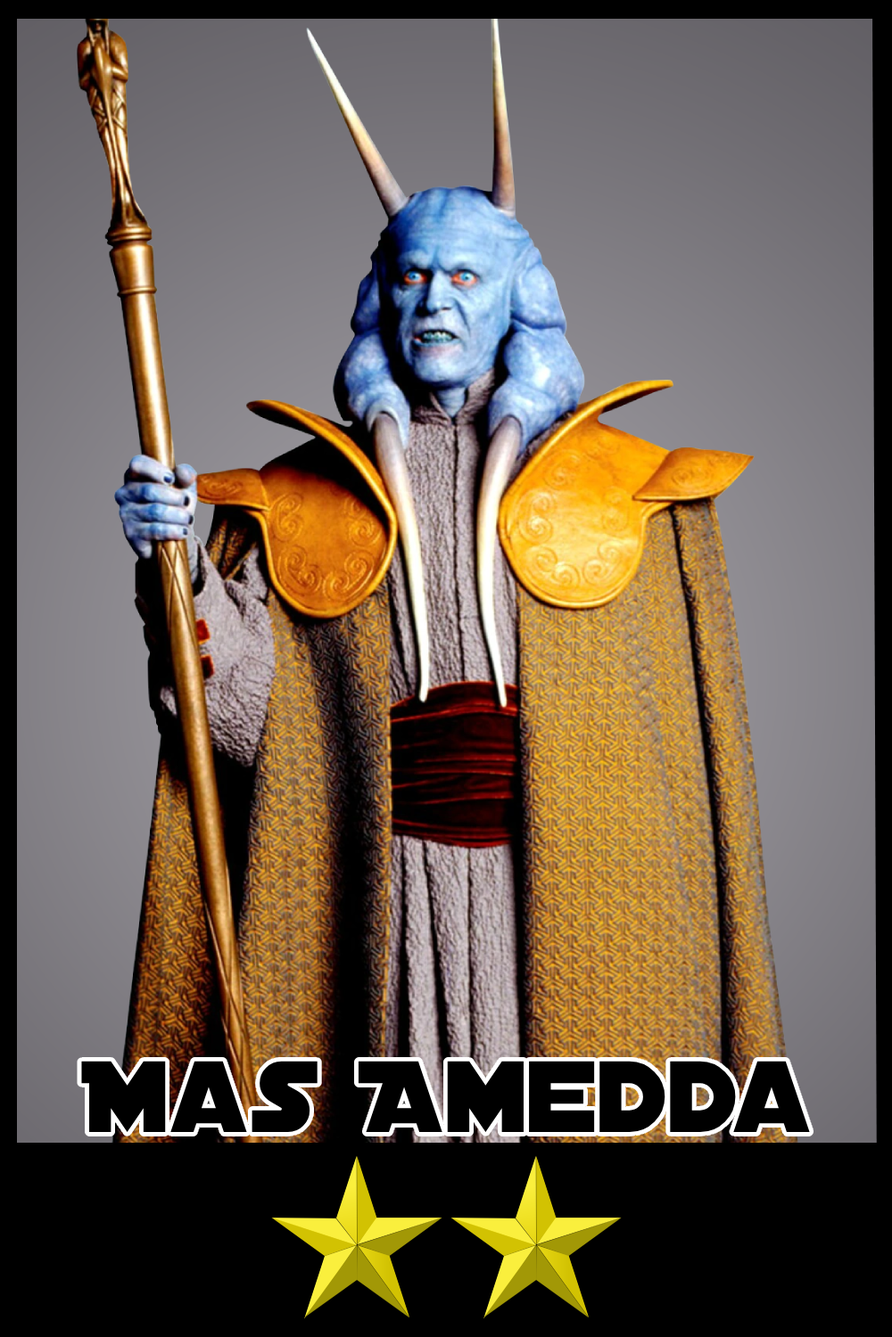
<style>
.page{position:relative;width:892px;height:1337px;background:#000000}
.page>*{position:absolute;margin:0}
.t1{font:108.6px "DistantGalaxy";color:#000000}
</style>
<div class="page">
<p class="t1" style="left:81px;top:1061px;width:729px;height:71px">Mas Amedda</p>
</div>
